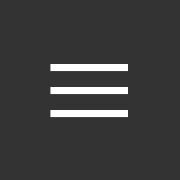
<style>
.page{position:relative;width:180px;height:180px;background:#333333}
.page>*{position:absolute;margin:0}
.t1{font:106.7px "NotoSansMonoCJKkr-Regular";color:#ffffff}
</style>
<div class="page">
<p class="t1" style="left:50px;top:64px;width:78px;height:54px">≡</p>
</div>
